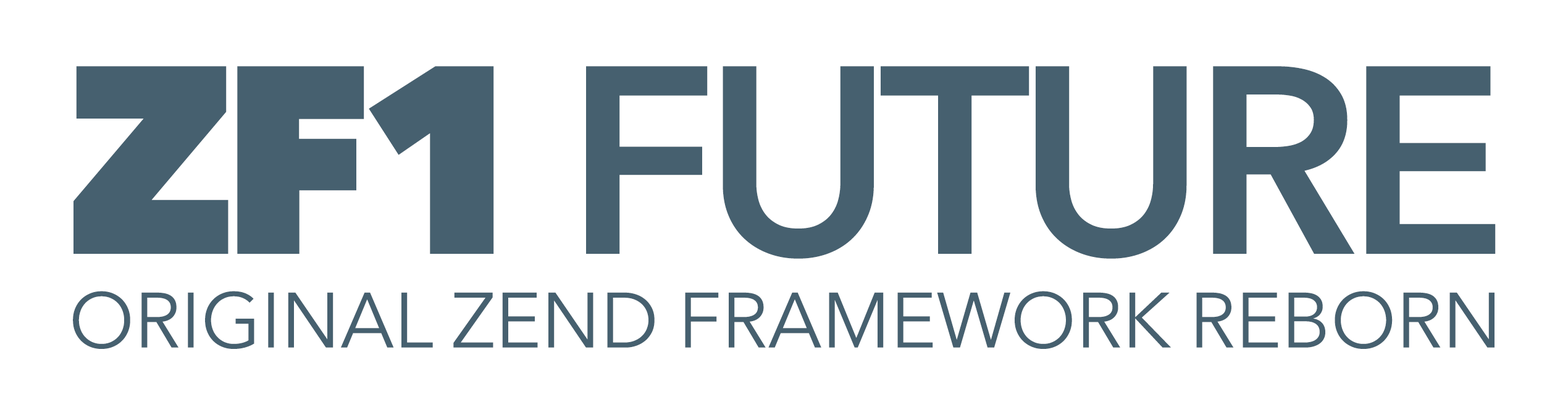
<style>
.page{position:relative;width:1568px;height:415px;background:#ffffff}
.page>*{position:absolute;margin:0}
.t1{font:264.6px "AvenirNext-DemiBold";letter-spacing:-0.05em;color:#46606f;text-transform:uppercase}
.t2{font:264.6px "AvenirNext-Heavy";letter-spacing:-0.075em;color:#46606f}
.t3{font:77.3px "AvenirNext-Regular";color:#46606f;text-transform:uppercase}
</style>
<div class="page">
<p class="t1" style="left:73px;top:66px;width:1423px;height:193px"><span class="t2">ZF1 </span>Future</p>
<p class="t3" style="left:73px;top:291px;width:1422px;height:58px">ORIGINAL ZEND FRAMEWORK REBORN</p>
</div>
